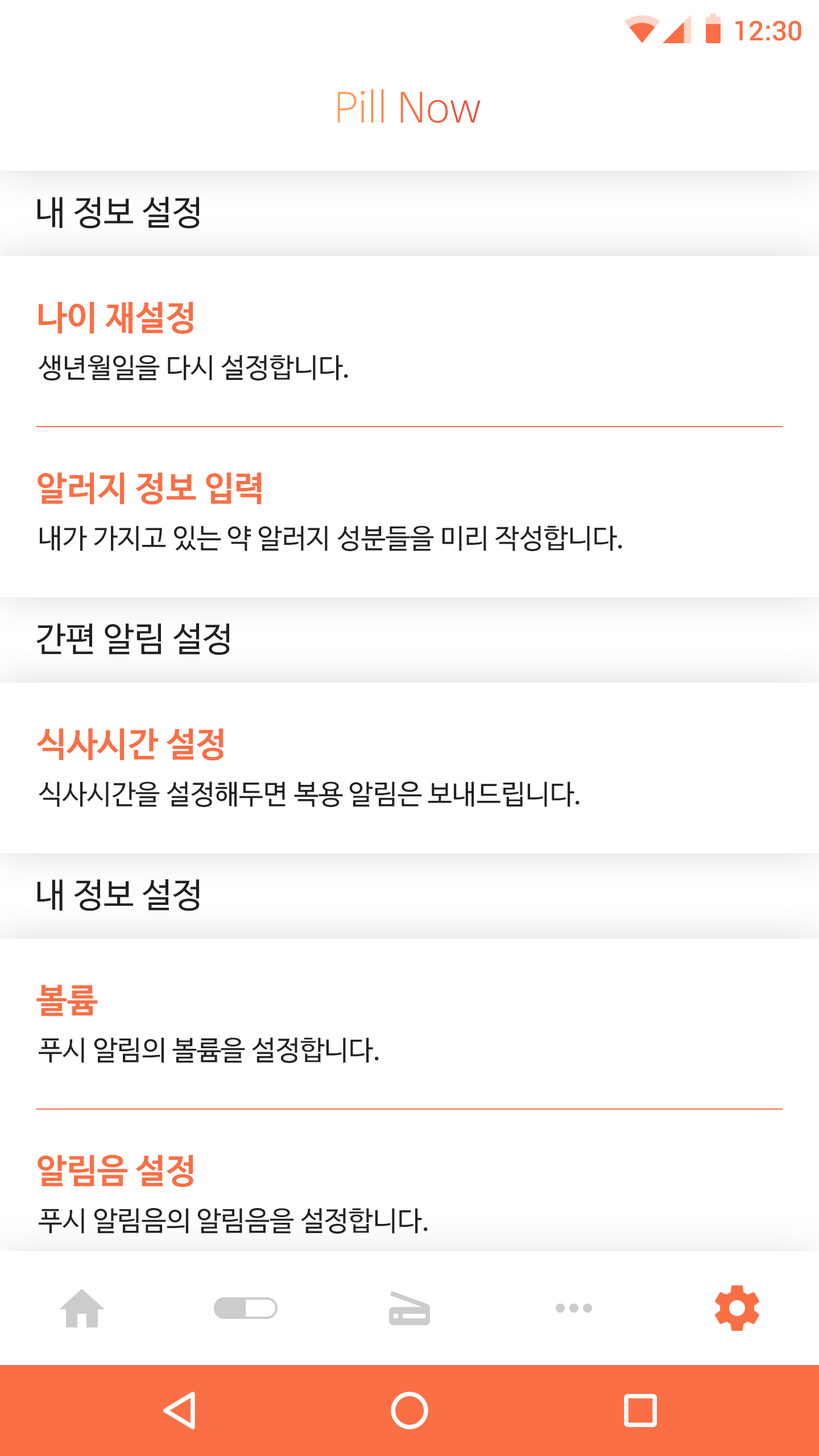
<style>
.page{position:relative;width:819px;height:1456px;background:#ffffff}
.page>*{position:absolute;margin:0}
.t1{font:27.3px "Roboto-Medium";color:#fa6f45}
.t2{font:40.9px "NanumBarunGothicLight"}
.t3{font:34.1px "NanumBarunGothic";color:#202020}
.t4{font:34.1px "NanumBarunGothicBold";color:#fa6f45}
.t5{font:27.3px "NanumBarunGothic";color:#222222}
</style>
<div class="page">
<p class="t1" style="left:735px;top:20px;width:66px;height:21px">12:30</p>
<p class="t2" style="left:337px;top:89px;width:144px;height:34px">Pill Now</p>
<p class="t3" style="left:37px;top:197px;width:163px;height:32px">내 정보 설정</p>
<p class="t4" style="left:39px;top:301px;width:154px;height:33px">나이 재설정</p>
<p class="t5" style="left:38px;top:355px;width:310px;height:25px">생년월일을 다시 설정합니다.</p>
<p class="t4" style="left:38px;top:472px;width:224px;height:32px">알러지 정보 입력</p>
<p class="t5" style="left:40px;top:526px;width:582px;height:25px">내가 가지고 있는 약 알러지 성분들을 미리 작성합니다.</p>
<p class="t3" style="left:36px;top:623px;width:194px;height:32px">간편 알림 설정</p>
<p class="t4" style="left:36px;top:728px;width:188px;height:32px">식사시간 설정</p>
<p class="t5" style="left:39px;top:781px;width:541px;height:26px">식사시간을 설정해두면 복용 알림은 보내드립니다.</p>
<p class="t3" style="left:37px;top:879px;width:163px;height:32px">내 정보 설정</p>
<p class="t4" style="left:36px;top:984px;width:62px;height:32px">볼륨</p>
<p class="t5" style="left:39px;top:1037px;width:340px;height:26px">푸시 알림의 볼륨을 설정합니다.</p>
<p class="t4" style="left:38px;top:1155px;width:155px;height:32px">알림음 설정</p>
<p class="t5" style="left:39px;top:1208px;width:389px;height:26px">푸시 알림음의 알림음을 설정합니다.</p>
</div>
